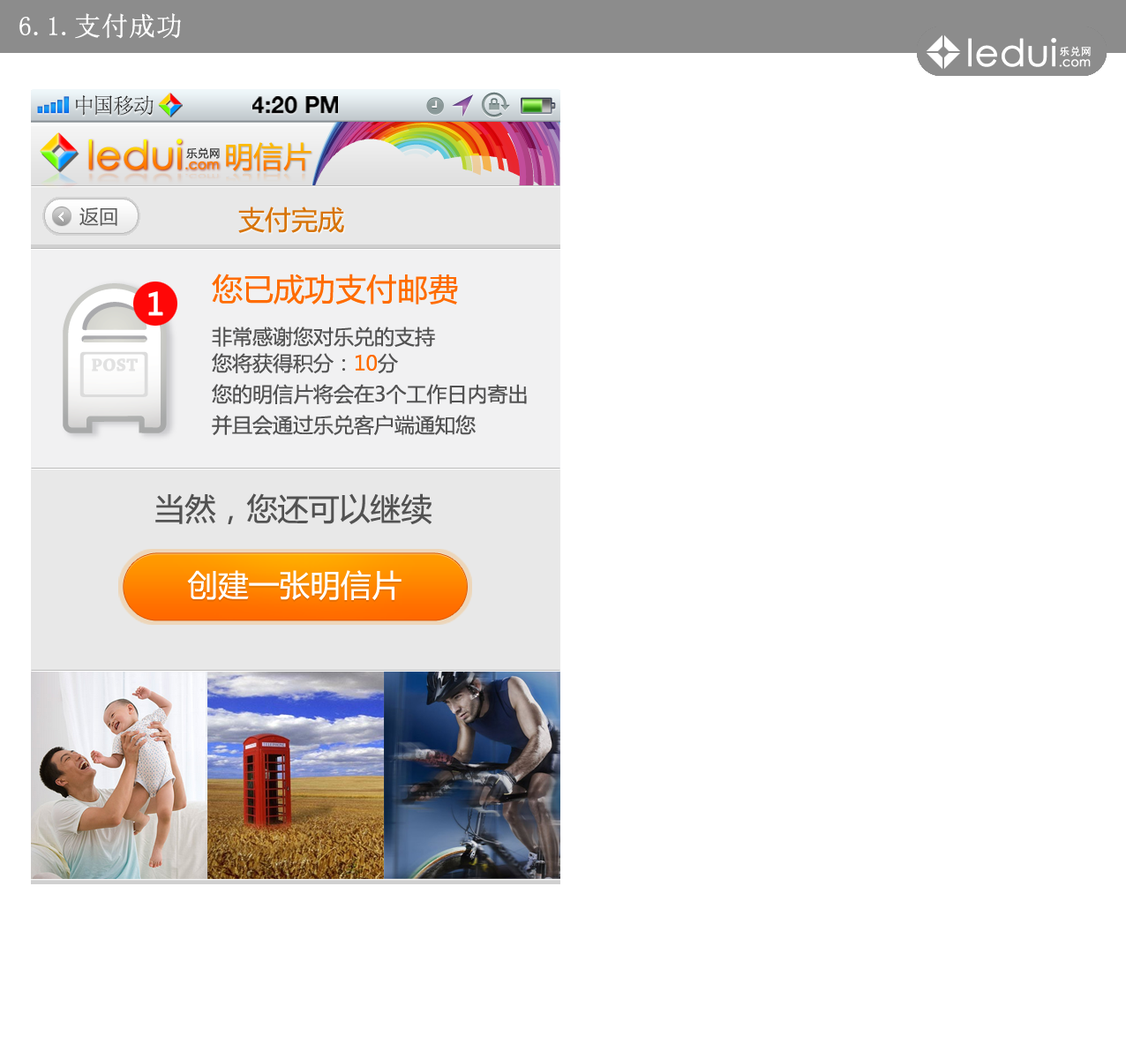
<style>
.page{position:relative;width:1126px;height:1059px;background:#ffffff}
.page>*{position:absolute;margin:0}
.t1{font:26.5px "SimSun";color:#ffffff;font-weight:bold}
.t2{font:21.5px "SimSun";color:#414141}
.t3{font:23.1px "HelveticaNeue-Bold";color:#000000;text-transform:uppercase}
.t4{font:39.5px "CenturyGothic";font-weight:bold}
.t5{font:13.2px "CenturyGothic";font-weight:bold}
.t6{font:10.9px "MicrosoftYaHei";letter-spacing:0.05em;color:#3d3d3d}
.t7{font:29.1px "MicrosoftYaHei"}
.t8{font:23.7px "CenturyGothic";color:#e0d5ce;font-weight:bold;scale:1.67 1}
.t9{font:7.9px "CenturyGothic";color:#e0d5ce;font-weight:bold;scale:1.67 1}
.t10{font:19.4px "MicrosoftYaHei";color:#5b5b5b}
.t11{font:26.5px "MicrosoftYaHei";color:#d7740a}
.t12{font:20.3px/30.9px "MicrosoftYaHei";color:#525252}
.t13{font:30.9px/26.5px "MicrosoftYaHei";color:#ff6c00}
.t14{font:20.3px/26.5px "MicrosoftYaHei";color:#525252}
.t15{font:20.3px/30.9px "MicrosoftYaHei";color:#ff6c00}
.t16{font:30px "MicrosoftYaHei";color:#ffffff;font-weight:bold}
.t17{font:30.9px "MicrosoftYaHei";color:#525252}
.t18{font:30.6px "MicrosoftYaHei";color:#ffffff}
</style>
<div class="page">
<p class="t1" style="left:19px;top:13px;width:162px;height:26px">6.1.支付成功</p>
<p class="t2" style="left:76px;top:95px;width:78px;height:21px">中国移动</p>
<p class="t3" style="left:252px;top:96px;width:86px;height:18px">4:20 PM</p>
<p class="t4" style="left:88px;top:139px;width:131px;height:31px">ledui<span class="t5">.com</span></p>
<p class="t6" style="left:186px;top:147px;width:34px;height:12px">乐兑网</p>
<p class="t7" style="left:226px;top:142px;width:86px;height:29px">明信片</p>
<p class="t8" style="left:88px;top:173px;width:131px;height:19px">ledui<span class="t9">.com</span></p>
<p class="t10" style="left:79px;top:207px;width:38px;height:19px">返回</p>
<p class="t11" style="left:238px;top:206px;width:106px;height:27px">支付完成</p>
<p class="t12" style="left:212px;top:274px;width:315px;height:161px"><span class="t13">您已成功支付邮费<br><br></span><span class="t14">非常感谢您对乐兑的支持<br></span>您将获得积分：<span class="t15">10</span>分<br>您的明信片将会在3个工作日内寄出<br>并且会通过乐兑客户端通知您</p>
<p class="t16" style="left:148px;top:291px;width:15px;height:25px">1</p>
<p class="t17" style="left:155px;top:493px;width:277px;height:31px">当然，您还可以继续</p>
<p class="t18" style="left:187px;top:570px;width:215px;height:31px">创建一张明信片</p>
</div>
